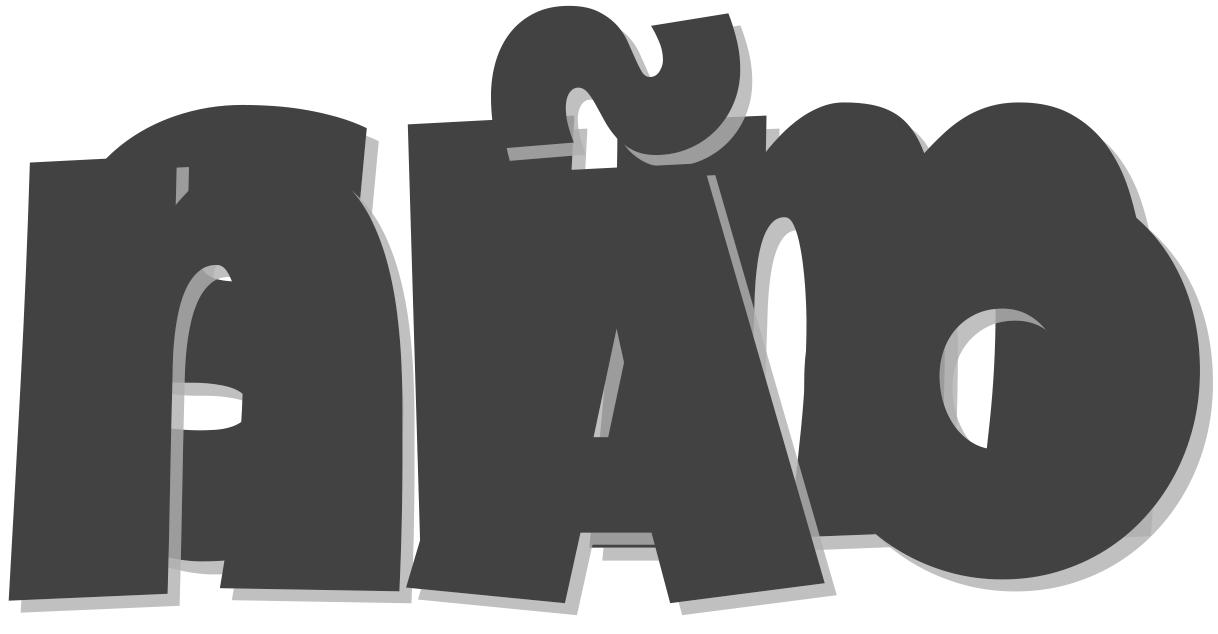
<style>
.page{position:relative;width:1218px;height:634px;background:#424242}
.page>*{position:absolute;margin:0}
.t1{font:638.9px "LuckiestGuy-Regular";color:#424242}
.t2{font:641.8px "LuckiestGuy-Regular";color:#424242}
</style>
<div class="page">
<p class="t1" style="left:8px;top:5px;width:1192px;height:599px">não</p>
<p class="t1" style="left:20px;top:17px;width:1193px;height:599px;opacity:0.79">não</p>
<p class="t2" style="left:63px;top:102px;width:1085px;height:460px">sim</p>
<p class="t2" style="left:75px;top:115px;width:1086px;height:460px;opacity:0.79">sim</p>
</div>
